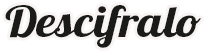
<style>
.page{position:relative;width:206px;height:53px;background:#ffffff}
.page>*{position:absolute;margin:0}
.t1{font:42.7px "Lobster1.4";color:#1a1a18;scale:1.15 1}
</style>
<div class="page">
<p class="t1" style="left:5px;top:5px;width:196px;height:43px">Descifralo</p>
</div>
